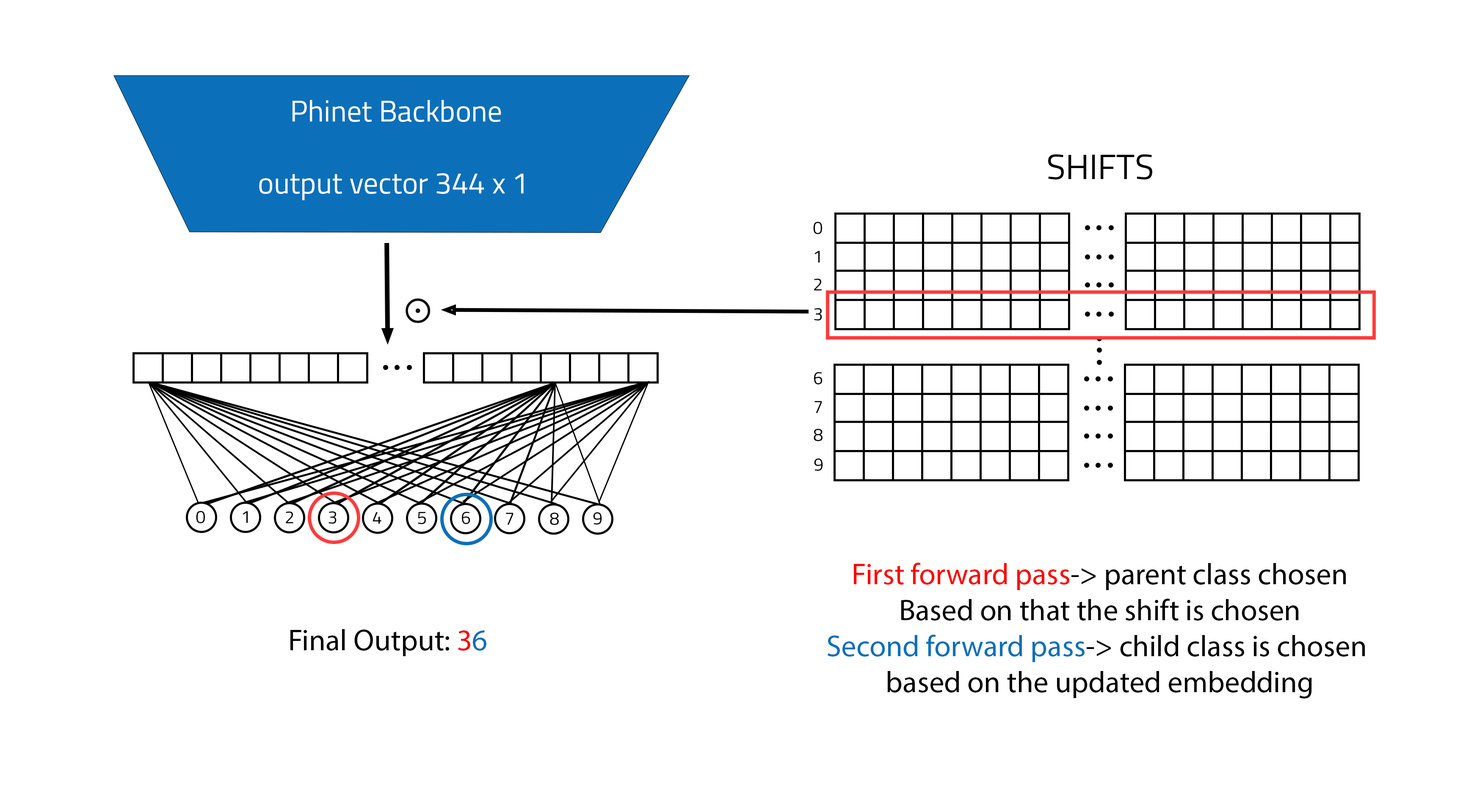
<style>
.page{position:relative;width:1474px;height:809px;background:#ffffff}
.page>*{position:absolute;margin:0}
.t1{font:30px "Titillium-Regular";color:#ffffff}
.t2{font:35.3px "Titillium-Regular";color:#000000}
.t3{font:17.6px "Titillium-Regular";color:#000000}
.t4{font:30px "MyriadPro-Regular";color:#000000}
.t5{font:30px "MyriadPro-Regular";color:#ff0000}
.t6{font:30px "MyriadPro-Regular";color:#0b70b9}
</style>
<div class="page">
<p class="t1" style="left:259px;top:100px;width:265px;height:100px;text-align:center">Phinet Backbone<br><br>output vector 344 x 1</p>
<p class="t2" style="left:1048px;top:154px;width:104px;height:25px">SHIFTS</p>
<p class="t3" style="left:813px;top:222px;width:9px;height:12px">0</p>
<p class="t3" style="left:814px;top:251px;width:6px;height:11px">1</p>
<p class="t3" style="left:814px;top:279px;width:8px;height:11px">2</p>
<p class="t3" style="left:814px;top:308px;width:8px;height:12px">3</p>
<p class="t3" style="left:814px;top:372px;width:9px;height:12px">6</p>
<p class="t3" style="left:814px;top:401px;width:8px;height:12px">7</p>
<p class="t3" style="left:814px;top:429px;width:9px;height:12px">8</p>
<p class="t3" style="left:814px;top:458px;width:9px;height:13px">9</p>
<p class="t3" style="left:196px;top:511px;width:9px;height:12px">0</p>
<p class="t3" style="left:243px;top:511px;width:5px;height:12px">1</p>
<p class="t3" style="left:286px;top:511px;width:7px;height:12px">2</p>
<p class="t3" style="left:328px;top:511px;width:9px;height:13px">3</p>
<p class="t3" style="left:373px;top:512px;width:8px;height:12px">4</p>
<p class="t3" style="left:418px;top:512px;width:8px;height:12px">5</p>
<p class="t3" style="left:462px;top:512px;width:8px;height:12px">6</p>
<p class="t3" style="left:506px;top:513px;width:7px;height:12px">7</p>
<p class="t3" style="left:550px;top:513px;width:9px;height:12px">8</p>
<p class="t3" style="left:593px;top:512px;width:9px;height:12px">9</p>
<p class="t4" style="left:828px;top:563px;width:537px;height:135px;text-align:center"><span class="t5">First forward pass</span>-&gt; parent class chosen<br>Based on that the shift is chosen<br><span class="t6">Second forward pass</span>-&gt; child class is chosen <br>based on the updated embedding</p>
<p class="t4" style="left:290px;top:629px;width:196px;height:27px">Final Output: <span class="t5">3</span><span class="t6">6</span></p>
</div>
